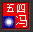
<style>
.page{position:relative;width:33px;height:32px;background:#f20000}
.page>*{position:absolute;margin:0}
.t1{font:10.4px "SimSun";color:#ffffff}
.t2{font:11.7px "SimSun";color:#ffffff}
</style>
<div class="page">
<p class="t1" style="left:7px;top:4px;width:18px;height:9px">五四</p>
<p class="t2" style="left:16px;top:15px;width:11px;height:12px">冯</p>
</div>
